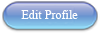
<style>
.page{position:relative;width:100px;height:33px}
.page>*{position:absolute;margin:0}
.t1{font:12.1px "TimesNewRomanPSMT";color:#fefefe}
</style>
<div class="page">
<p class="t1" style="left:21px;top:10px;width:57px;height:9px">Edit Profile</p>
</div>
